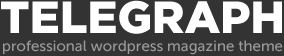
<style>
.page{position:relative;width:284px;height:56px;background:#333333}
.page>*{position:absolute;margin:0}
.t1{font:45px "GothamBlack";color:#ffffff}
.t2{font:15px "MuseoSans-500";color:#999999}
</style>
<div class="page">
<p class="t1" style="left:1px;top:0px;width:281px;height:34px">TELEGRAPH</p>
<p class="t2" style="left:3px;top:40px;width:280px;height:15px">professional wordpress magazine theme</p>
</div>
